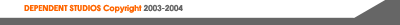
<style>
.page{position:relative;width:400px;height:25px;background:#ffffff}
.page>*{position:absolute;margin:0}
.t1{font:8px "Atlanta-Demi";color:#ff6600}
.t2{font:8px "Atlanta-Demi";color:#666666}
</style>
<div class="page">
<p class="t1" style="left:24px;top:4px;width:159px;height:9px">DEPENDENT STUDIOS Copyright <span class="t2">2003-2004</span></p>
</div>
